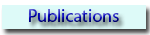
<style>
.page{position:relative;width:150px;height:35px;background:#ddfaf8}
.page>*{position:absolute;margin:0}
.t1{font:18px "MyriadHebrew-Regular"}
</style>
<div class="page">
<p class="t1" style="left:29px;top:9px;width:90px;height:13px">Publications</p>
</div>
